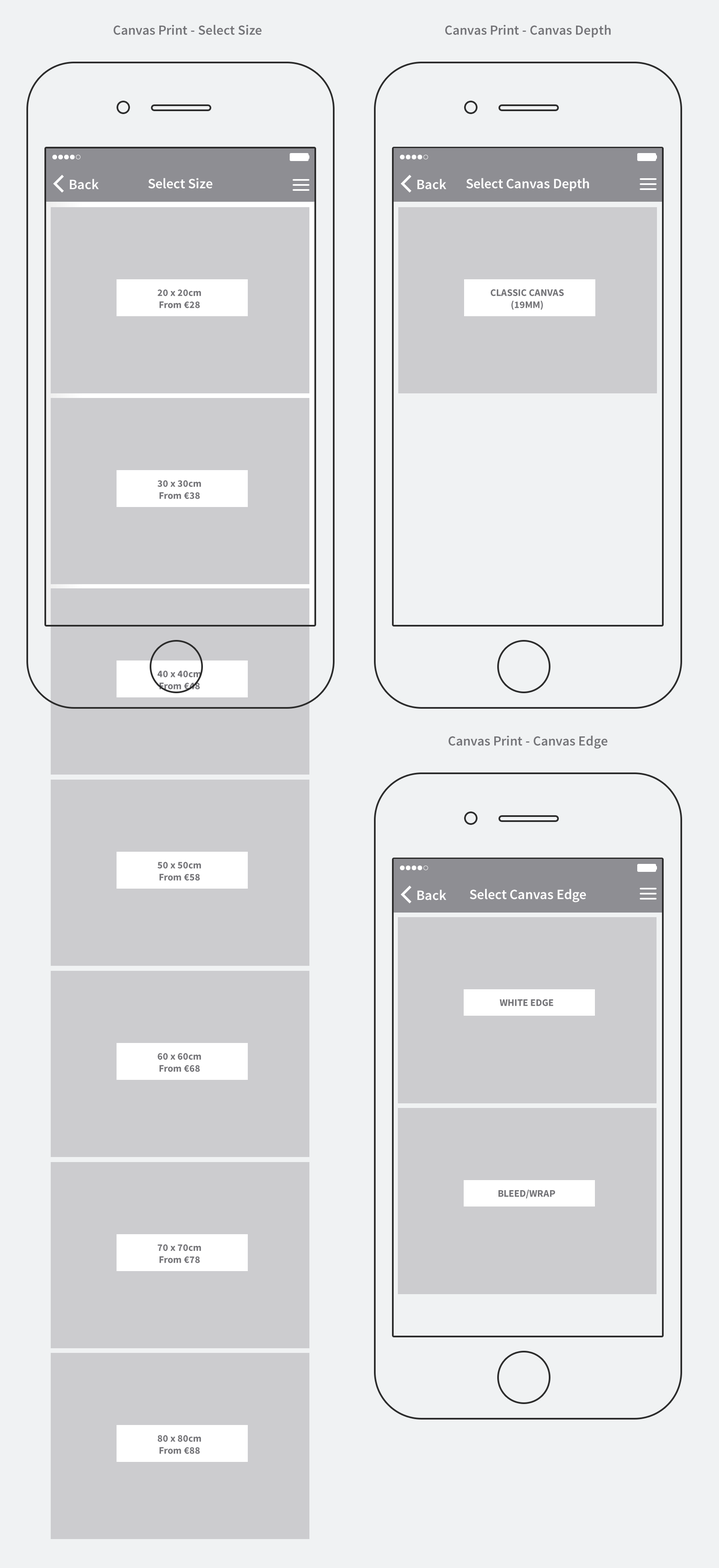
<style>
.page{position:relative;width:719px;height:1568px;background:#f0f2f3}
.page>*{position:absolute;margin:0}
.t1{font:13.8px "SourceSansPro-Semibold";color:#737377}
.t2{font:14.3px "SourceSansPro-Semibold";color:#ffffff}
.t3{font:10.1px "SourceSansPro-Bold";color:#737377}
</style>
<div class="page">
<p class="t1" style="left:114px;top:25px;width:148px;height:10px">Canvas Print - Select Size</p>
<p class="t1" style="left:445px;top:25px;width:166px;height:13px">Canvas Print - Canvas Depth</p>
<p class="t2" style="left:70px;top:179px;width:29px;height:11px">Back</p>
<p class="t2" style="left:148px;top:178px;width:65px;height:11px">Select Size</p>
<p class="t2" style="left:417px;top:179px;width:30px;height:11px">Back</p>
<p class="t2" style="left:466px;top:178px;width:123px;height:13px">Select Canvas Depth</p>
<p class="t3" style="left:158px;top:289px;width:43px;height:19px;text-align:center">20 x 20cm<br>From €28</p>
<p class="t3" style="left:491px;top:289px;width:73px;height:21px;text-align:center">CLASSIC CANVAS<br>(19MM)</p>
<p class="t3" style="left:157px;top:480px;width:44px;height:19px;text-align:center">30 x 30cm<br>From €38</p>
<p class="t3" style="left:157px;top:671px;width:44px;height:18px;text-align:center">40 x 40cm<br>From €48</p>
<p class="t1" style="left:449px;top:736px;width:159px;height:13px">Canvas Print - Canvas Edge</p>
<p class="t3" style="left:157px;top:862px;width:44px;height:19px;text-align:center">50 x 50cm<br>From €58</p>
<p class="t2" style="left:417px;top:889px;width:30px;height:11px">Back</p>
<p class="t2" style="left:470px;top:889px;width:116px;height:13px">Select Canvas Edge</p>
<p class="t3" style="left:500px;top:999px;width:54px;height:7px">WHITE EDGE</p>
<p class="t3" style="left:158px;top:1053px;width:43px;height:19px;text-align:center">60 x 60cm<br>From €68</p>
<p class="t3" style="left:499px;top:1189px;width:56px;height:10px">BLEED/WRAP</p>
<p class="t3" style="left:158px;top:1244px;width:43px;height:19px;text-align:center">70 x 70cm<br>From €78</p>
<p class="t3" style="left:158px;top:1435px;width:43px;height:19px;text-align:center">80 x 80cm<br>From €88</p>
</div>
